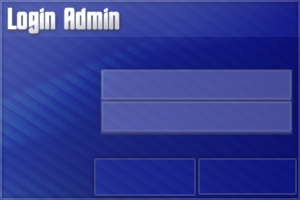
<style>
.page{position:relative;width:300px;height:200px}
.page>*{position:absolute;margin:0}
.t1{font:30px "StarTrekBT-Regular";color:#ffffff}
</style>
<div class="page">
<p class="t1" style="left:8px;top:8px;width:111px;height:25px">Login Admin</p>
</div>
